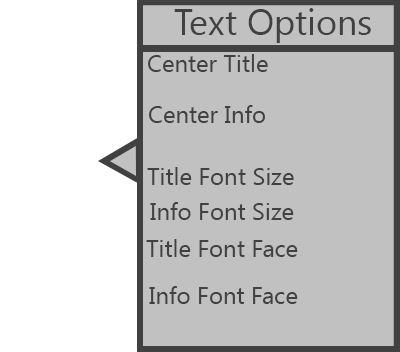
<style>
.page{position:relative;width:400px;height:352px;background:#c1c1c1}
.page>*{position:absolute;margin:0}
.t1{font:36px "SegoeUI";color:#414141}
.t2{font:24px "SegoeUI";color:#414141}
</style>
<div class="page">
<p class="t1" style="left:174px;top:8px;width:197px;height:35px">Text Options</p>
<p class="t2" style="left:148px;top:54px;width:120px;height:18px">Center Title</p>
<p class="t2" style="left:149px;top:105px;width:116px;height:18px">Center Info</p>
<p class="t2" style="left:147px;top:167px;width:147px;height:18px">Title Font Size</p>
<p class="t2" style="left:150px;top:202px;width:144px;height:18px">Info Font Size</p>
<p class="t2" style="left:146px;top:239px;width:152px;height:18px">Title Font Face</p>
<p class="t2" style="left:149px;top:286px;width:149px;height:18px">Info Font Face</p>
</div>
